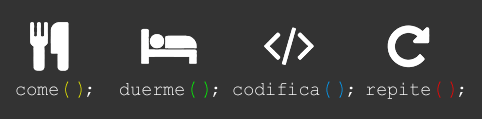
<style>
.page{position:relative;width:482px;height:119px;background:#333333}
.page>*{position:absolute;margin:0}
.t1{font:19.5px "CourierNewPSMT";color:#ffffff;scale:0.95 1}
.t2{font:22px "CourierNewPSMT";letter-spacing:0.15em;color:#eded00;scale:0.95 1}
.t3{font:22px "CourierNewPSMT";letter-spacing:-0.15em;color:#eded00;scale:0.95 1}
.t4{font:19.5px "CourierNewPSMT";letter-spacing:-0.15em;color:#ffffff;scale:0.95 1}
.t5{font:22px "CourierNewPSMT";letter-spacing:0.15em;color:#00ff00;scale:0.95 1}
.t6{font:22px "CourierNewPSMT";letter-spacing:-0.15em;color:#00ff00;scale:0.95 1}
.t7{font:22px "CourierNewPSMT";letter-spacing:0.15em;color:#00a2ff;scale:0.95 1}
.t8{font:22px "CourierNewPSMT";letter-spacing:-0.15em;color:#00a2ff;scale:0.95 1}
.t9{font:22px "CourierNewPSMT";letter-spacing:0.15em;color:#ff0000;scale:0.95 1}
.t10{font:22px "CourierNewPSMT";letter-spacing:-0.15em;color:#ff0000;scale:0.95 1}
</style>
<div class="page">
<p class="t1" style="left:16px;top:81px;width:76px;height:17px">come<span class="t2">(</span><span class="t3">)</span><span class="t4">;</span></p>
<p class="t1" style="left:120px;top:81px;width:98px;height:17px">duerme<span class="t5">(</span><span class="t6">)</span><span class="t4">;</span></p>
<p class="t1" style="left:233px;top:81px;width:120px;height:17px">codifica<span class="t7">(</span><span class="t8">)</span><span class="t4">;</span></p>
<p class="t1" style="left:366px;top:81px;width:98px;height:18px">repite<span class="t9">(</span><span class="t10">)</span><span class="t4">;</span></p>
</div>
